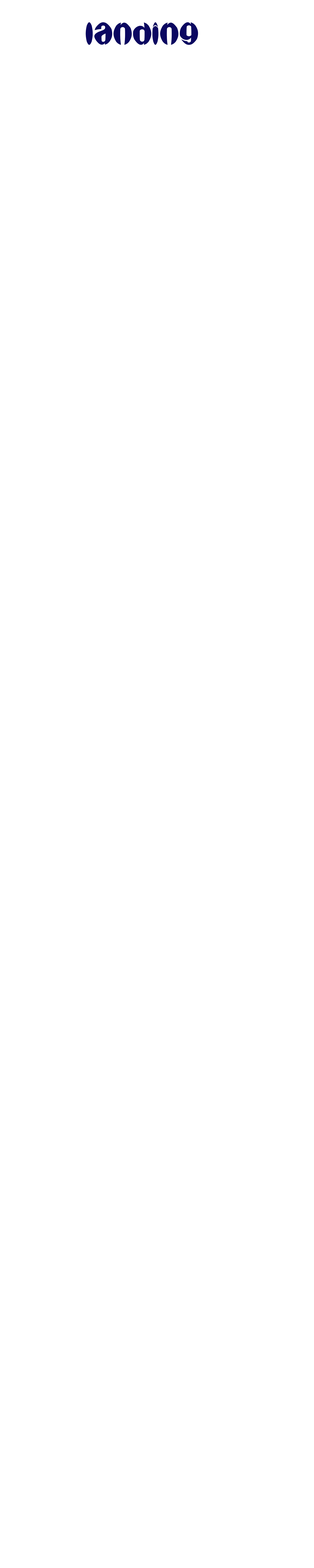
<style>
.page{position:relative;width:314px;height:1568px;background:#ffffff}
.page>*{position:absolute;margin:0}
.t1{font:23.8px "Aragones";color:#0b0761}
</style>
<div class="page">
<p class="t1" style="left:86px;top:22px;width:112px;height:23px">Landing</p>
</div>
